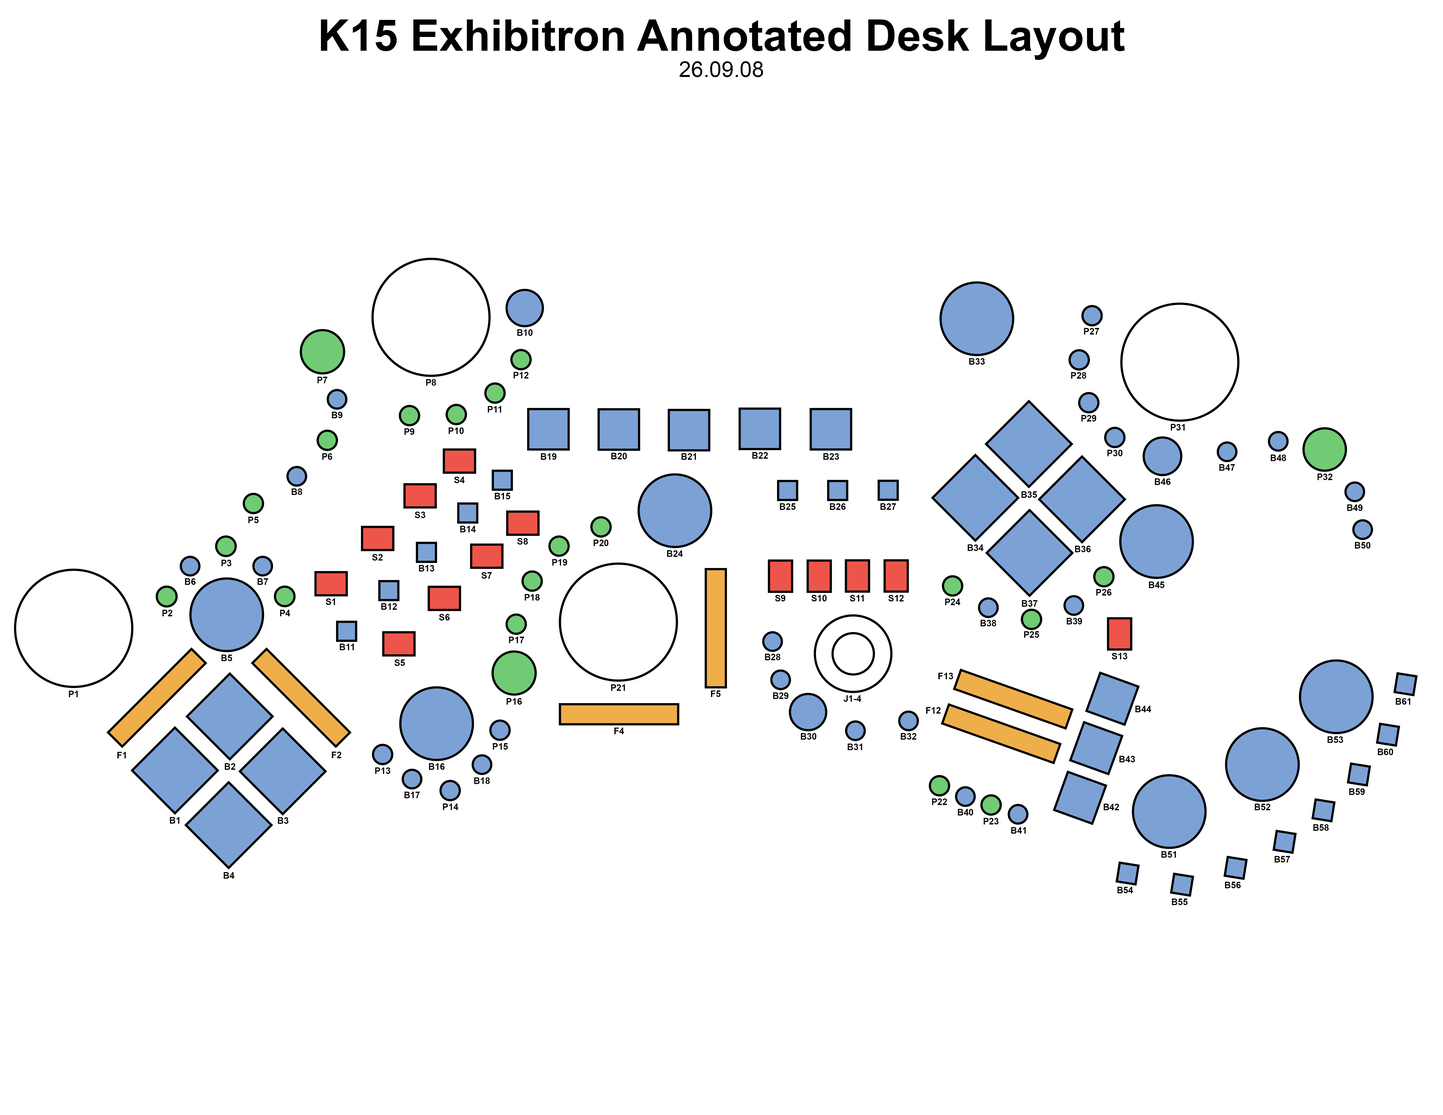
<style>
.page{position:relative;width:1443px;height:1115px;background:#ffffff}
.page>*{position:absolute;margin:0}
.t1{font:43.7px "Arial-BoldMT";color:#000000}
.t2{font:21.9px "ArialMT";color:#000000}
.t3{font:9px "Arial-BoldMT";color:#000000}
</style>
<div class="page">
<p class="t1" style="left:321px;top:19px;width:804px;height:58px;text-align:center">K15 Exhibitron Annotated Desk Layout<br><span class="t2">26.09.08</span></p>
<p class="t3" style="left:517px;top:329px;width:16px;height:7px">B10</p>
<p class="t3" style="left:1084px;top:328px;width:15px;height:7px">P27</p>
<p class="t3" style="left:969px;top:358px;width:16px;height:7px">B33</p>
<p class="t3" style="left:318px;top:377px;width:9px;height:6px">P7</p>
<p class="t3" style="left:514px;top:372px;width:15px;height:7px">P12</p>
<p class="t3" style="left:1071px;top:372px;width:15px;height:7px">P28</p>
<p class="t3" style="left:426px;top:379px;width:10px;height:7px">P8</p>
<p class="t3" style="left:332px;top:412px;width:10px;height:6px">B9</p>
<p class="t3" style="left:488px;top:406px;width:13px;height:7px">P11</p>
<p class="t3" style="left:1082px;top:415px;width:14px;height:7px">P29</p>
<p class="t3" style="left:1171px;top:424px;width:14px;height:7px">P31</p>
<p class="t3" style="left:405px;top:428px;width:9px;height:7px">P9</p>
<p class="t3" style="left:449px;top:427px;width:15px;height:7px">P10</p>
<p class="t3" style="left:1108px;top:450px;width:15px;height:6px">P30</p>
<p class="t3" style="left:322px;top:453px;width:10px;height:7px">P6</p>
<p class="t3" style="left:541px;top:453px;width:16px;height:7px">B19</p>
<p class="t3" style="left:611px;top:453px;width:16px;height:6px">B20</p>
<p class="t3" style="left:682px;top:453px;width:14px;height:7px">B21</p>
<p class="t3" style="left:752px;top:452px;width:16px;height:7px">B22</p>
<p class="t3" style="left:824px;top:453px;width:15px;height:7px">B23</p>
<p class="t3" style="left:1271px;top:455px;width:15px;height:6px">B48</p>
<p class="t3" style="left:1220px;top:464px;width:15px;height:7px">B47</p>
<p class="t3" style="left:1318px;top:474px;width:15px;height:6px">P32</p>
<p class="t3" style="left:454px;top:477px;width:11px;height:6px">S4</p>
<p class="t3" style="left:1155px;top:478px;width:16px;height:7px">B46</p>
<p class="t3" style="left:292px;top:489px;width:10px;height:6px">B8</p>
<p class="t3" style="left:495px;top:493px;width:15px;height:6px">B15</p>
<p class="t3" style="left:1022px;top:491px;width:15px;height:7px">B35</p>
<p class="t3" style="left:780px;top:503px;width:16px;height:7px">B25</p>
<p class="t3" style="left:830px;top:503px;width:16px;height:7px">B26</p>
<p class="t3" style="left:881px;top:503px;width:15px;height:7px">B27</p>
<p class="t3" style="left:1347px;top:504px;width:16px;height:7px">B49</p>
<p class="t3" style="left:248px;top:517px;width:11px;height:6px">P5</p>
<p class="t3" style="left:415px;top:512px;width:11px;height:6px">S3</p>
<p class="t3" style="left:460px;top:526px;width:16px;height:6px">B14</p>
<p class="t3" style="left:517px;top:538px;width:11px;height:7px">S8</p>
<p class="t3" style="left:594px;top:540px;width:15px;height:6px">P20</p>
<p class="t3" style="left:968px;top:544px;width:16px;height:7px">B34</p>
<p class="t3" style="left:1075px;top:546px;width:16px;height:6px">B36</p>
<p class="t3" style="left:1355px;top:542px;width:16px;height:7px">B50</p>
<p class="t3" style="left:372px;top:554px;width:11px;height:7px">S2</p>
<p class="t3" style="left:667px;top:550px;width:16px;height:7px">B24</p>
<p class="t3" style="left:222px;top:560px;width:10px;height:6px">P3</p>
<p class="t3" style="left:419px;top:565px;width:15px;height:7px">B13</p>
<p class="t3" style="left:552px;top:559px;width:15px;height:7px">P19</p>
<p class="t3" style="left:185px;top:578px;width:11px;height:7px">B6</p>
<p class="t3" style="left:258px;top:578px;width:10px;height:7px">B7</p>
<p class="t3" style="left:482px;top:572px;width:10px;height:7px">S7</p>
<p class="t3" style="left:1149px;top:582px;width:16px;height:6px">B45</p>
<p class="t3" style="left:1096px;top:589px;width:16px;height:7px">P26</p>
<p class="t3" style="left:326px;top:598px;width:9px;height:7px">S1</p>
<p class="t3" style="left:381px;top:603px;width:16px;height:7px">B12</p>
<p class="t3" style="left:525px;top:594px;width:15px;height:7px">P187</p>
<p class="t3" style="left:775px;top:595px;width:10px;height:7px">S9</p>
<p class="t3" style="left:811px;top:595px;width:16px;height:7px">S10</p>
<p class="t3" style="left:850px;top:595px;width:14px;height:7px">S11</p>
<p class="t3" style="left:888px;top:595px;width:16px;height:7px">S12</p>
<p class="t3" style="left:945px;top:599px;width:15px;height:6px">P24</p>
<p class="t3" style="left:1022px;top:600px;width:16px;height:7px">B37</p>
<p class="t3" style="left:162px;top:610px;width:10px;height:6px">P2</p>
<p class="t3" style="left:280px;top:610px;width:10px;height:6px">P4</p>
<p class="t3" style="left:439px;top:614px;width:11px;height:7px">S6</p>
<p class="t3" style="left:1067px;top:618px;width:15px;height:7px">B39</p>
<p class="t3" style="left:981px;top:620px;width:15px;height:6px">B38</p>
<p class="t3" style="left:509px;top:637px;width:15px;height:6px">P17</p>
<p class="t3" style="left:1024px;top:631px;width:15px;height:7px">P25</p>
<p class="t3" style="left:340px;top:644px;width:14px;height:6px">B11</p>
<p class="t3" style="left:765px;top:654px;width:15px;height:6px">B28</p>
<p class="t3" style="left:1112px;top:653px;width:16px;height:7px">S13</p>
<p class="t3" style="left:222px;top:655px;width:10px;height:6px">B5</p>
<p class="t3" style="left:394px;top:660px;width:11px;height:6px">S5</p>
<p class="t3" style="left:939px;top:673px;width:14px;height:6px">F13</p>
<p class="t3" style="left:611px;top:684px;width:14px;height:7px">P21</p>
<p class="t3" style="left:69px;top:691px;width:9px;height:6px">P1</p>
<p class="t3" style="left:507px;top:698px;width:15px;height:7px">P16</p>
<p class="t3" style="left:711px;top:691px;width:10px;height:6px">F5</p>
<p class="t3" style="left:773px;top:693px;width:16px;height:6px">B29</p>
<p class="t3" style="left:844px;top:695px;width:17px;height:7px">J1-4</p>
<p class="t3" style="left:1396px;top:698px;width:15px;height:7px">B61</p>
<p class="t3" style="left:926px;top:707px;width:15px;height:7px">F12</p>
<p class="t3" style="left:1136px;top:706px;width:15px;height:6px">B44</p>
<p class="t3" style="left:614px;top:728px;width:10px;height:6px">F4</p>
<p class="t3" style="left:801px;top:733px;width:16px;height:7px">B30</p>
<p class="t3" style="left:901px;top:733px;width:15px;height:7px">B32</p>
<p class="t3" style="left:1328px;top:736px;width:16px;height:7px">B53</p>
<p class="t3" style="left:493px;top:743px;width:15px;height:7px">P15</p>
<p class="t3" style="left:848px;top:744px;width:14px;height:6px">B31</p>
<p class="t3" style="left:1378px;top:749px;width:15px;height:6px">B60</p>
<p class="t3" style="left:117px;top:752px;width:9px;height:7px">F1</p>
<p class="t3" style="left:332px;top:752px;width:9px;height:6px">F2</p>
<p class="t3" style="left:1120px;top:756px;width:15px;height:7px">B43</p>
<p class="t3" style="left:225px;top:763px;width:10px;height:7px">B2</p>
<p class="t3" style="left:375px;top:768px;width:16px;height:6px">P13</p>
<p class="t3" style="left:429px;top:763px;width:16px;height:7px">B16</p>
<p class="t3" style="left:474px;top:778px;width:16px;height:6px">B18</p>
<p class="t3" style="left:405px;top:792px;width:15px;height:6px">B17</p>
<p class="t3" style="left:1349px;top:789px;width:16px;height:6px">B59</p>
<p class="t3" style="left:443px;top:804px;width:15px;height:6px">P145</p>
<p class="t3" style="left:932px;top:799px;width:15px;height:6px">P22</p>
<p class="t3" style="left:958px;top:809px;width:15px;height:7px">B40</p>
<p class="t3" style="left:1104px;top:804px;width:15px;height:6px">B42</p>
<p class="t3" style="left:1255px;top:804px;width:15px;height:6px">B52</p>
<p class="t3" style="left:170px;top:817px;width:10px;height:7px">B1</p>
<p class="t3" style="left:278px;top:817px;width:11px;height:7px">B3</p>
<p class="t3" style="left:984px;top:818px;width:15px;height:7px">P23</p>
<p class="t3" style="left:1011px;top:827px;width:15px;height:7px">B41</p>
<p class="t3" style="left:1314px;top:824px;width:15px;height:7px">B58</p>
<p class="t3" style="left:1162px;top:851px;width:14px;height:7px">B51</p>
<p class="t3" style="left:1275px;top:856px;width:15px;height:7px">B57</p>
<p class="t3" style="left:224px;top:872px;width:10px;height:7px">B4</p>
<p class="t3" style="left:1225px;top:882px;width:16px;height:6px">B56</p>
<p class="t3" style="left:1118px;top:887px;width:15px;height:6px">B54</p>
<p class="t3" style="left:1172px;top:899px;width:16px;height:6px">B55</p>
</div>
